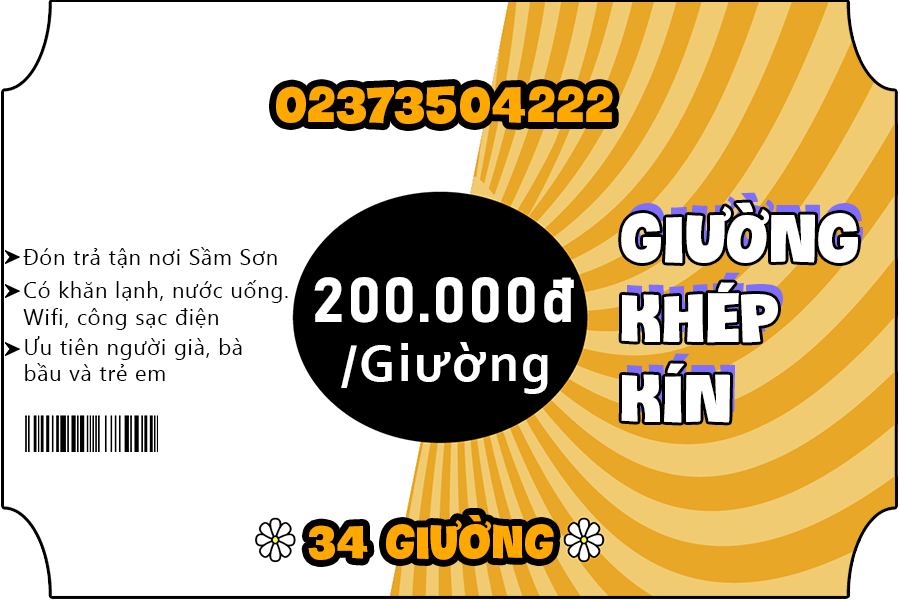
<style>
.page{position:relative;width:900px;height:600px;background:#ffffff}
.page>*{position:absolute;margin:0}
.t1{font:50px "iCielCrocante";letter-spacing:0.04em;color:#ffa800}
.t2{font:66.7px "iCielCrocante";letter-spacing:0.04em;color:#ffffff}
.t3{font:21.8px "SegoeUI";letter-spacing:0.04em;color:#000000}
.t4{font:62.5px "Bahnschrift-Bold";letter-spacing:0.04em;color:#ffffff}
.t5{font:54.2px "Corbel-Bold";letter-spacing:0.04em;color:#ffffff}
.t6{font:45.8px "iCielCrocante";letter-spacing:0.04em;color:#ffa800}
</style>
<div class="page">
<p class="t1" style="left:276px;top:86px;width:337px;height:38px">02373504222</p>
<p class="t2" style="left:621px;top:202px;width:237px;height:221px">GIƯỜNG<br>KHÉP<br>KÍN</p>
<p class="t3" style="left:23px;top:247px;width:254px;height:21px">Đón trả tận nơi Sầm Sơn</p>
<p class="t3" style="left:23px;top:280px;width:265px;height:50px">Có khăn lạnh, nước uống. <br>Wifi, công sạc điện</p>
<p class="t4" style="left:314px;top:277px;width:260px;height:46px">200.000đ</p>
<p class="t3" style="left:25px;top:336px;width:217px;height:45px">Ưu tiên người già, bà <br>bầu và trẻ em</p>
<p class="t5" style="left:341px;top:342px;width:207px;height:52px">/Giường</p>
<p class="t6" style="left:308px;top:515px;width:246px;height:45px">34 giường</p>
</div>
